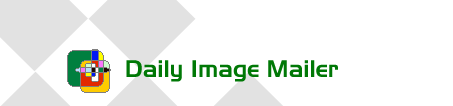
<style>
.page{position:relative;width:453px;height:106px;background:#ffffff}
.page>*{position:absolute;margin:0}
.t1{font:24px "Slicker";color:#007806}
</style>
<div class="page">
<p class="t1" style="left:126px;top:60px;width:212px;height:22px">Daily Image Mailer</p>
</div>
